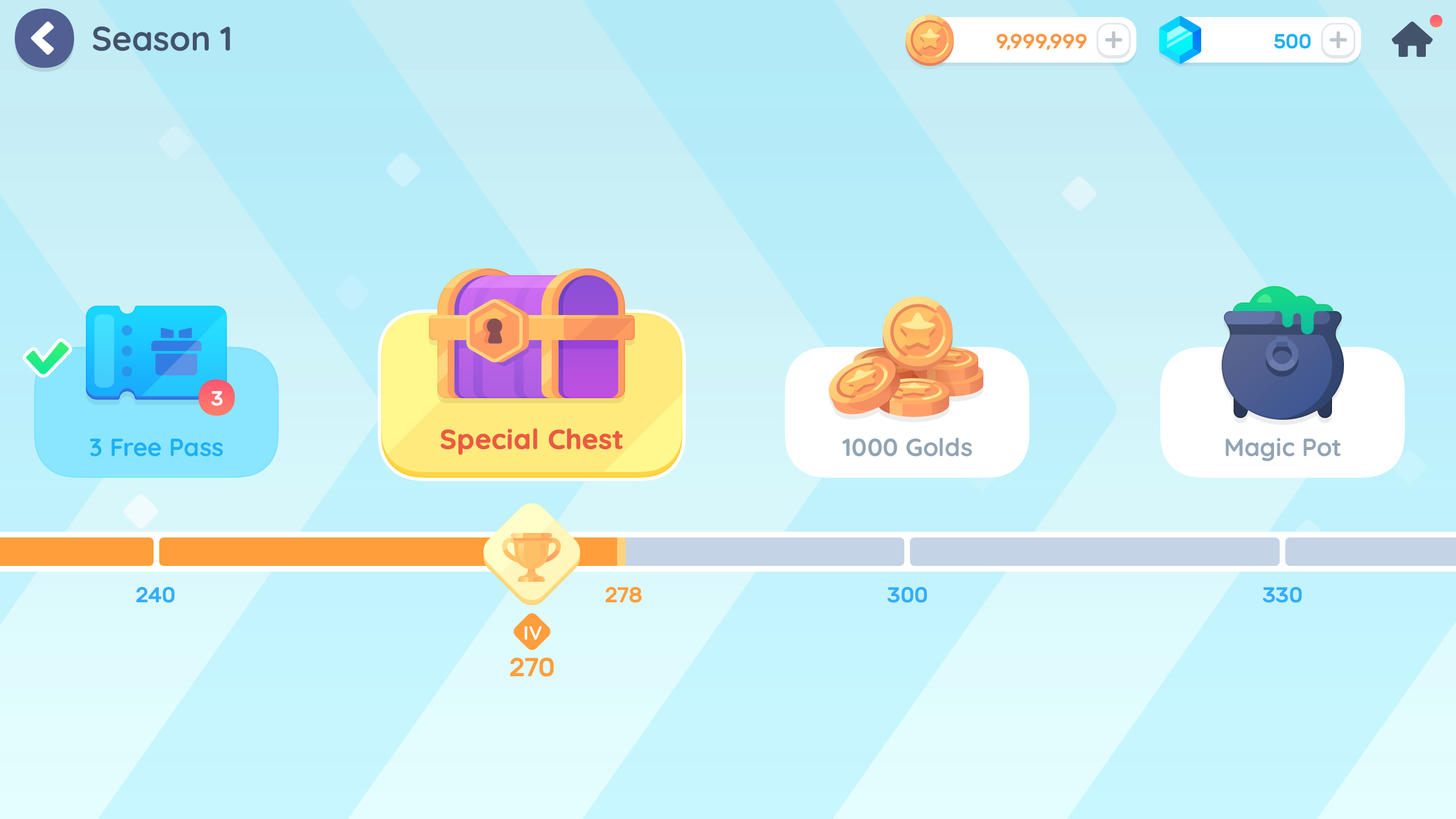
<style>
.page{position:relative;width:1456px;height:819px}
.page>*{position:absolute;margin:0}
.t1{font:34.1px "Quicksand-Bold";color:#43536c}
.t2{font:20.5px "Rubik-Medium";letter-spacing:-0.01em;color:#fd9744}
.t3{font:20.5px "Rubik-Medium";letter-spacing:-0.01em;color:#1cb0f6;text-transform:uppercase}
.t4{font:20.5px "Rubik-Medium";letter-spacing:-0.01em;color:#ffffff;text-transform:uppercase}
.t5{font:27.3px "Quicksand-Bold";color:#ec5a42;font-weight:bold}
.t6{font:25px "Quicksand-Bold";color:#92a4b4}
.t7{font:25px "Quicksand-Bold";color:#1cb0f6}
.t8{font:21.6px "Rubik-Medium";letter-spacing:-0.01em;color:#34adfc}
.t9{font:21.6px "Rubik-Medium";letter-spacing:-0.01em;color:#ff9e3a}
.t10{font:19.6px "Quicksand-Bold";letter-spacing:-0.01em;color:#ffffff}
.t11{font:26.2px "Rubik-Medium";letter-spacing:-0.01em;color:#ff9e3a}
</style>
<div class="page">
<p class="t1" style="left:93px;top:26px;width:137px;height:25px">Season 1</p>
<p class="t2" style="left:996px;top:34px;width:91px;height:16px">9,999,999</p>
<p class="t3" style="left:1274px;top:34px;width:37px;height:15px">500</p>
<p class="t4" style="left:211px;top:391px;width:12px;height:15px">3</p>
<p class="t5" style="left:441px;top:428px;width:182px;height:27px">Special Chest</p>
<p class="t6" style="left:842px;top:437px;width:130px;height:20px">1000 Golds</p>
<p class="t6" style="left:1226px;top:438px;width:115px;height:23px">Magic Pot</p>
<p class="t7" style="left:90px;top:439px;width:133px;height:18px">3 Free Pass</p>
<p class="t8" style="left:136px;top:587px;width:39px;height:16px">240</p>
<p class="t9" style="left:605px;top:587px;width:37px;height:16px">278</p>
<p class="t8" style="left:887px;top:587px;width:40px;height:16px">300</p>
<p class="t8" style="left:1263px;top:587px;width:39px;height:16px">330</p>
<p class="t10" style="left:524px;top:626px;width:18px;height:14px">IV</p>
<p class="t11" style="left:510px;top:657px;width:44px;height:20px">270</p>
</div>
